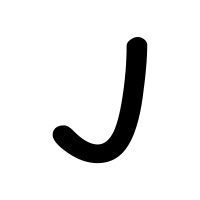
<style>
.page{position:relative;width:200px;height:200px;background:#ffffff}
.page>*{position:absolute;margin:0}
.t1{font:170px "SegoePrint-Bold";color:#000000}
</style>
<div class="page">
<p class="t1" style="left:52px;top:37px;width:96px;height:127px">J</p>
</div>
